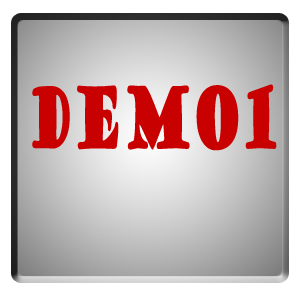
<style>
.page{position:relative;width:300px;height:300px}
.page>*{position:absolute;margin:0}
.t1{font:80.8px "GoudyStout";letter-spacing:0.005em;color:#c90000;font-weight:bold;scale:0.5 1}
</style>
<div class="page">
<p class="t1" style="left:32px;top:84px;width:245px;height:67px">Demo1</p>
</div>
